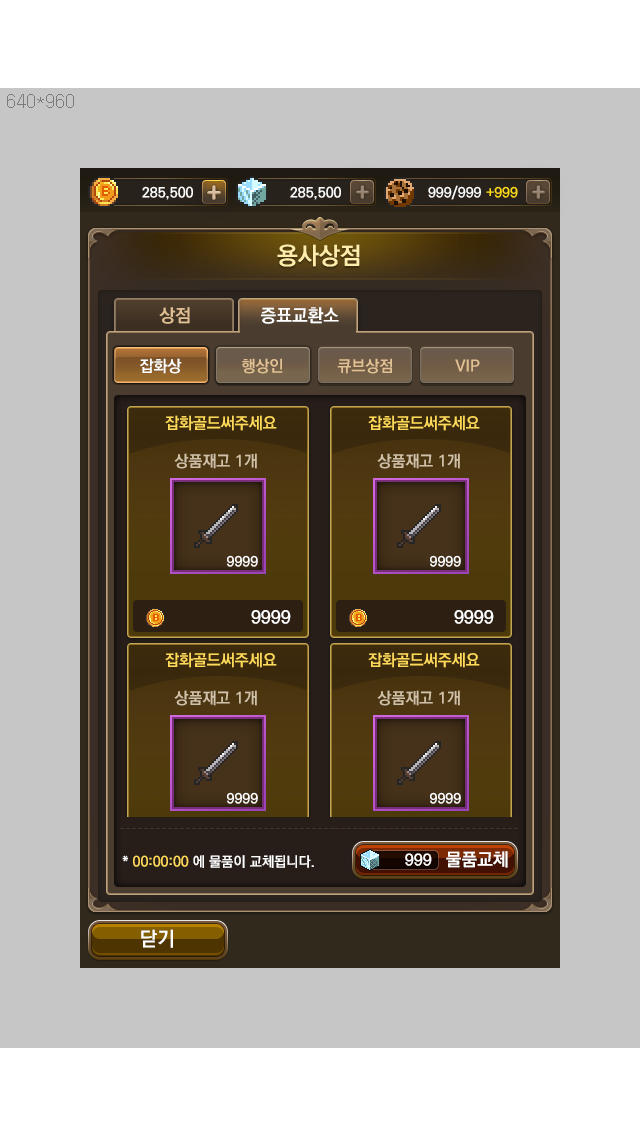
<style>
.page{position:relative;width:640px;height:1136px;background:#c6c6c6}
.page>*{position:absolute;margin:0}
.t1{font:24px "KoPubDotumBold";color:#ffedab}
.t2{font:18px "KoPubDotumBold";color:#e0c093}
.t3{font:18px "KoPubDotumBold";color:#ffffff}
.t4{font:16px "KoPubDotumBold";color:#ffffff}
.t5{font:16px "KoPubDotumBold";color:#e1c093}
.t6{font:14px "KoPubDotumBold";color:#ffffff}
.t7{font:14px "KoPubDotumBold";color:#ffda5b}
.t8{font:20px "KoPubDotumBold";color:#ffffff}
</style>
<div class="page">
<p class="t1" style="left:277px;top:244px;width:83px;height:23px">용사상점</p>
<p class="t2" style="left:159px;top:307px;width:31px;height:17px">상점</p>
<p class="t3" style="left:261px;top:307px;width:78px;height:17px">증표교환소</p>
<p class="t4" style="left:140px;top:358px;width:42px;height:16px">잡화상</p>
<p class="t5" style="left:242px;top:358px;width:41px;height:16px">행상인</p>
<p class="t5" style="left:337px;top:358px;width:55px;height:16px">큐브상점</p>
<p class="t5" style="left:455px;top:359px;width:25px;height:13px">VIP</p>
<p class="t6" style="left:122px;top:855px;width:192px;height:13px">* <span class="t7">00:00:00</span> 에 물품이 교체됩니다.</p>
<p class="t4" style="left:405px;top:853px;width:27px;height:13px">999</p>
<p class="t3" style="left:446px;top:851px;width:62px;height:17px">물품교체</p>
<p class="t8" style="left:141px;top:929px;width:32px;height:19px">닫기</p>
</div>
